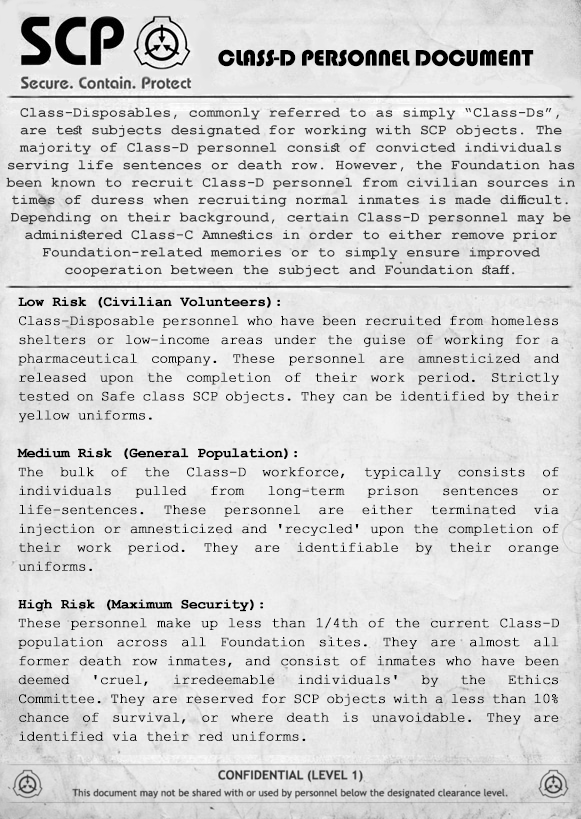
<style>
.page{position:relative;width:581px;height:819px}
.page>*{position:absolute;margin:0}
.t1{font:23.6px "Bauhaus93";letter-spacing:-0.025em;color:#000000;text-transform:uppercase}
.t2{font:14.6px "CourierNewPS-BoldMT";letter-spacing:0.01em;color:#343434}
.t3{font:14.2px/18.9px "CourierNewPSMT";letter-spacing:-0.025em;color:#000000;font-weight:bold}
.t4{font:14.2px/18.9px "CourierNewPS-BoldMT";letter-spacing:-0.025em;color:#000000;font-weight:bold}
</style>
<div class="page">
<p class="t1" style="left:218px;top:49px;width:316px;height:18px">CLASS-D PERSONNEL DOCUMENT</p>
<p class="t2" style="left:6px;top:107px;width:569px;height:170px;text-align:center">Class-Disposables, commonly referred to as simply “Class-Ds”, are test subjects designated for working with SCP objects. The majority of Class-D personnel consist of convicted individuals serving life sentences or death row. However, the Foundation has been known to recruit Class-D personnel from civilian sources in times of duress when recruiting normal inmates is made difficult. Depending on their background, certain Class-D personnel may be administered Class-C Amnestics in order to either remove prior Foundation-related memories or to simply ensure improved cooperation between the subject and Foundation staff.</p>
<p class="t3" style="left:17px;top:297px;width:542px;height:444px;text-align:justify"><span class="t4"><br><br><br><br><br><br>Low Risk (Civilian Volunteers):<br></span>Class-Disposable personnel who have been recruited from homeless shelters or low-income areas under the guise of working for a pharmaceutical company. These personnel are amnesticized and released upon the completion of their work period. Strictly tested on Safe class SCP objects. They can be identified by their yellow uniforms.<br><br><span class="t4">Medium Risk (General Population):<br></span>The bulk of the Class-D workforce, typically consists of individuals pulled from long-term prison sentences or life-sentences. These personnel are either terminated via injection or amnesticized and 'recycled' upon the completion of their work period. They are identifiable by their orange uniforms.<br><br><span class="t4">High Risk (Maximum Security):<br></span>These personnel make up less than 1/4th of the current Class-D population across all Foundation sites. They are almost all former death row inmates, and consist of inmates who have been deemed 'cruel, irredeemable individuals' by the Ethics Committee. They are reserved for SCP objects with a less than 10% chance of survival, or where death is unavoidable. They are identified via their red uniforms.</p>
</div>
